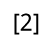
<style>
.page{position:relative;width:53px;height:41px;background:#ffffff}
.page>*{position:absolute;margin:0}
.t1{font:23.7px "DroidSans";color:#000000}
</style>
<div class="page">
<p class="t1" style="left:14px;top:13px;width:25px;height:22px">[2]</p>
</div>
